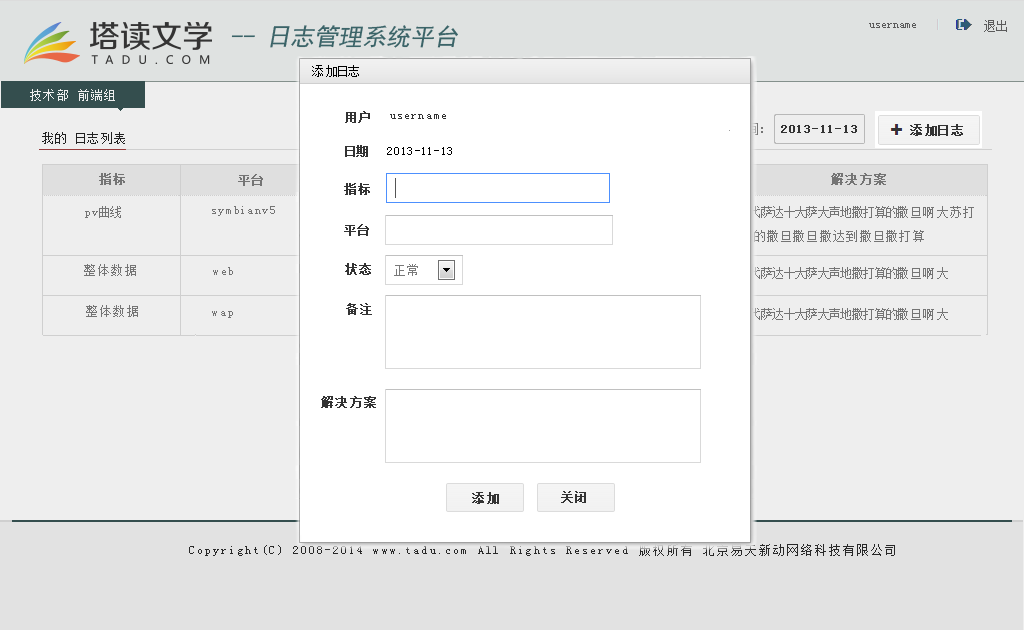
<style>
.page{position:relative;width:1024px;height:630px;background:#eeeeee}
.page>*{position:absolute;margin:0}
.t1{font:24px "SimHei";color:#3a676c;font-style:italic}
.t2{font:12px "SimSun";color:#5c5c5c}
.t3{font:12px "SimSun";letter-spacing:0.2em;color:#000000}
.t4{font:12px "SimSun";letter-spacing:0.2em;color:#ffffff}
.t5{font:12px "SimSun";letter-spacing:0.2em;color:#333333;font-weight:bold}
.t6{font:12px "SimSun";letter-spacing:0.2em;color:#333333}
.t7{font:12px "SimSun";letter-spacing:0.2em}
.t8{font:12px "SimSun";letter-spacing:0.25em;color:#333333;font-weight:bold}
.t9{font:12px "SimSun";letter-spacing:0.25em;color:#1c1c1c}
.t10{font:12px "SimSun";letter-spacing:0.2em;color:#797979;font-weight:bold}
.t11{font:12px "SimSun";letter-spacing:0.2em;color:#797979}
.t12{font:12px/24px "SimSun";letter-spacing:0.2em;color:#797979}
.t13{font:12px/24px "SimSun";color:#797979}
.t14{font:12px "SimSun";color:#797979}
.t15{font:12px "SimSun";letter-spacing:0.2em;color:#252525}
</style>
<div class="page">
<p class="t1" style="left:231px;top:25px;width:227px;height:23px">-- 日志管理系统平台</p>
<p class="t2" style="left:869px;top:23px;width:47px;height:5px">username</p>
<p class="t2" style="left:984px;top:20px;width:23px;height:12px">退出</p>
<p class="t3" style="left:312px;top:65px;width:47px;height:12px">添加日志</p>
<p class="t4" style="left:30px;top:89px;width:85px;height:12px">技术部 前端组</p>
<p class="t5" style="left:345px;top:111px;width:25px;height:12px">用户</p>
<p class="t6" style="left:390px;top:114px;width:56px;height:5px">username</p>
<p class="t7" style="left:735px;top:123px;width:28px;height:12px">时间：</p>
<p class="t5" style="left:781px;top:125px;width:76px;height:8px">2013-11-13</p>
<p class="t8" style="left:910px;top:124px;width:53px;height:12px">添加日志</p>
<p class="t9" style="left:42px;top:132px;width:83px;height:12px">我的 日志列表</p>
<p class="t5" style="left:345px;top:145px;width:23px;height:12px">日期</p>
<p class="t3" style="left:387px;top:147px;width:65px;height:8px">2013-11-13</p>
<p class="t10" style="left:99px;top:173px;width:26px;height:12px">指标</p>
<p class="t10" style="left:238px;top:174px;width:25px;height:12px">平台</p>
<p class="t10" style="left:831px;top:173px;width:55px;height:12px">解决方案</p>
<p class="t5" style="left:344px;top:183px;width:26px;height:12px">指标</p>
<p class="t11" style="left:85px;top:206px;width:36px;height:12px">pv曲线</p>
<p class="t11" style="left:212px;top:206px;width:63px;height:10px">symbianv5</p>
<p class="t12" style="left:715px;top:206px;width:259px;height:36px"><span class="t13">撒大时代萨达十大萨大声地撒打算的</span>撒旦啊大苏打<br>撒打算的撒旦撒旦撒达到撒旦撒打算</p>
<p class="t5" style="left:344px;top:224px;width:25px;height:12px">平台</p>
<p class="t11" style="left:84px;top:264px;width:52px;height:12px">整体数据</p>
<p class="t11" style="left:213px;top:267px;width:20px;height:8px">web</p>
<p class="t5" style="left:345px;top:263px;width:26px;height:12px">状态</p>
<p class="t11" style="left:394px;top:264px;width:24px;height:12px">正常</p>
<p class="t14" style="left:715px;top:267px;width:233px;height:12px">撒大时代萨达十大萨大声地撒打算的<span class="t11">撒旦啊大</span></p>
<p class="t11" style="left:86px;top:305px;width:52px;height:12px">整体数据</p>
<p class="t5" style="left:346px;top:303px;width:26px;height:12px">备注</p>
<p class="t11" style="left:212px;top:311px;width:21px;height:7px">wap</p>
<p class="t14" style="left:715px;top:308px;width:233px;height:12px">撒大时代萨达十大萨大声地撒打算的<span class="t11">撒旦啊大</span></p>
<p class="t5" style="left:321px;top:396px;width:55px;height:12px">解决方案</p>
<p class="t8" style="left:472px;top:492px;width:27px;height:12px">添加</p>
<p class="t8" style="left:561px;top:491px;width:25px;height:12px">关闭</p>
<p class="t15" style="left:189px;top:544px;width:706px;height:12px">Copyright(C) 2008-2014 www.tadu.com All Rights Reserved 版权所有 北京易天新动网络科技有限公司</p>
</div>
